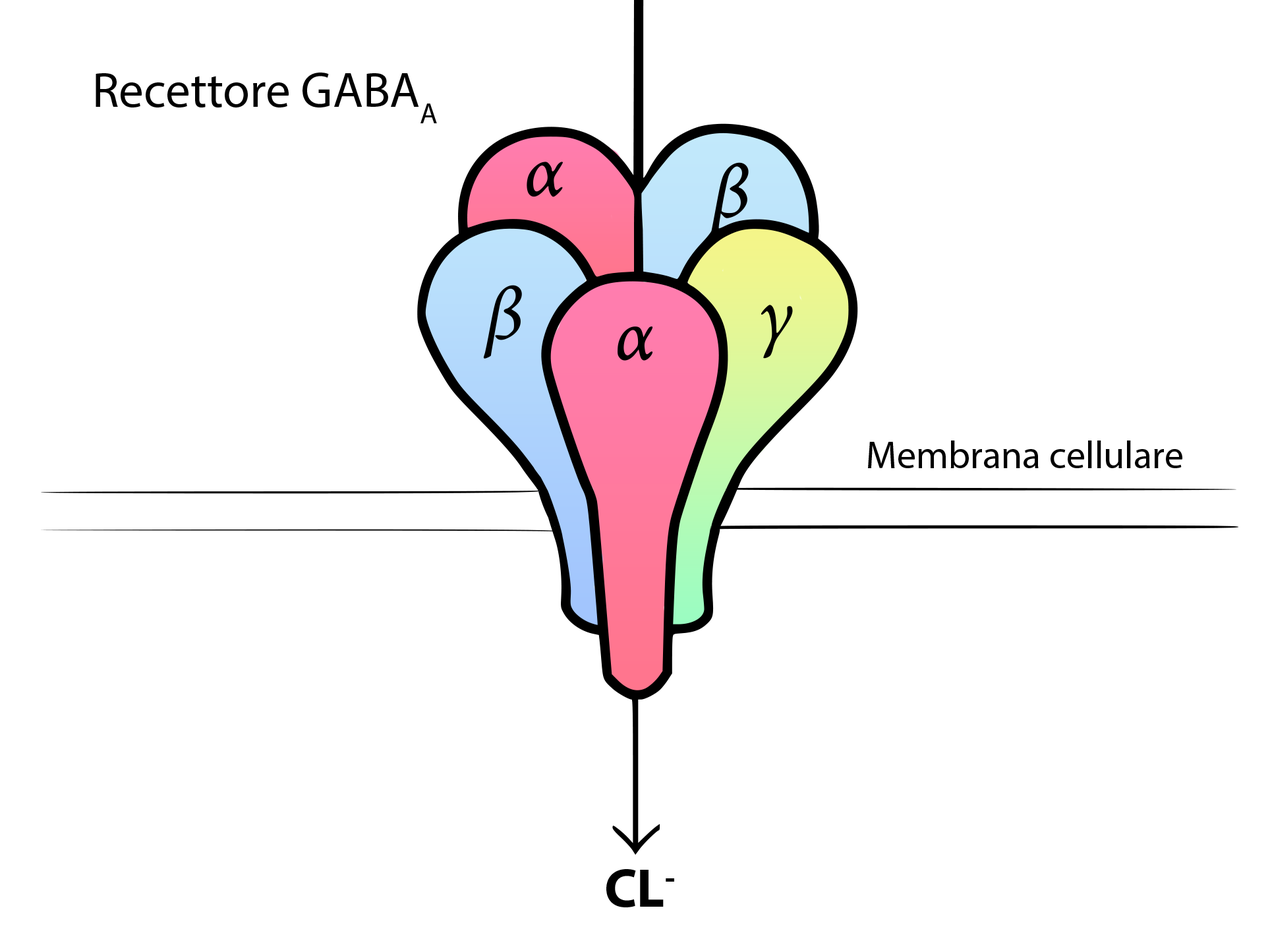
<style>
.page{position:relative;width:1270px;height:939px;background:#ffffff}
.page>*{position:absolute;margin:0}
.t1{font:49.4px "MyriadPro-Regular";color:#000000}
.t2{font:38.5px "MyriadPro-Regular";color:#000000}
.t3{font:54.9px "MyriadPro-Bold";color:#000000}
</style>
<div class="page">
<p class="t1" style="left:96px;top:73px;width:341px;height:50px">Recettore GABAA</p>
<p class="t2" style="left:868px;top:440px;width:315px;height:28px">Membrana cellulare</p>
<p class="t3" style="left:606px;top:869px;width:68px;height:38px">CL-</p>
</div>
